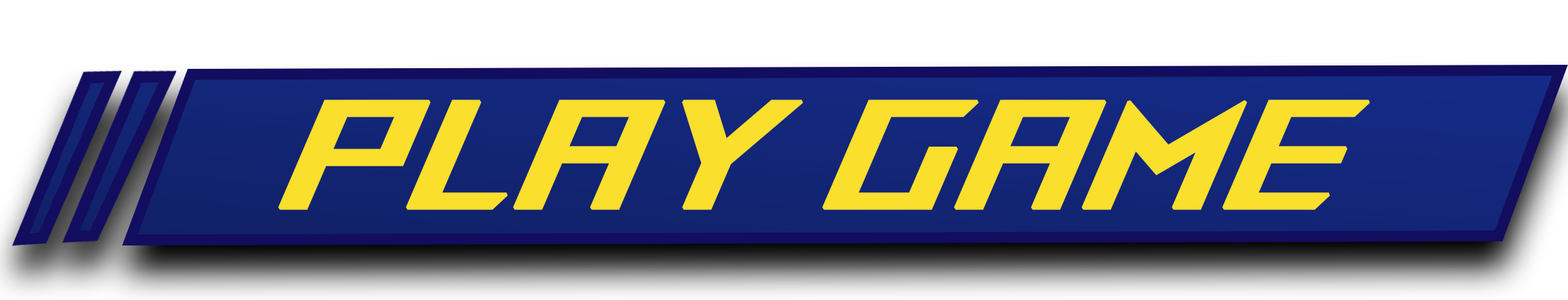
<style>
.page{position:relative;width:1568px;height:300px;background:#ffffff}
.page>*{position:absolute;margin:0}
.t1{font:165.8px "ROGLyonsType-Regular";color:#fadf2d;font-weight:bold;scale:0.88 1}
</style>
<div class="page">
<p class="t1" style="left:278px;top:100px;width:1092px;height:110px">PLAY GAME</p>
</div>
